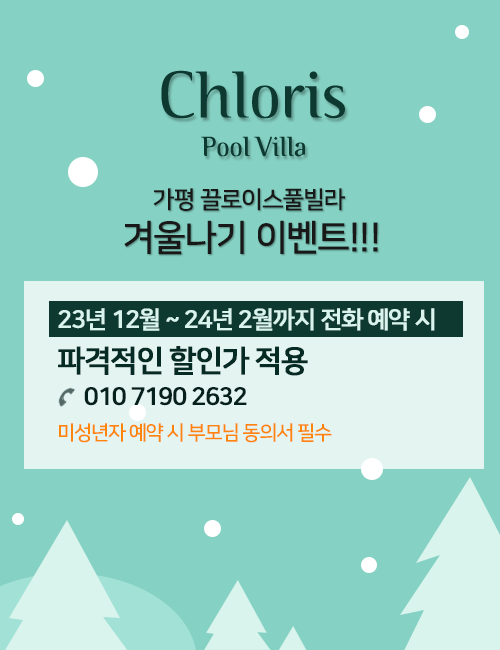
<style>
.page{position:relative;width:500px;height:650px;background:#85d1c3}
.page>*{position:absolute;margin:0}
.t1{font:36px/32.5px "NanumSquare_acB";color:#181818}
.t2{font:24px/32.5px "NanumSquare_acB";color:#181818}
.t3{font:24px/38.5px "NanumSquareB";letter-spacing:-0.06em;color:#d9f4ed;font-weight:bold}
.t4{font:30px/38.5px "NanumSquareB";letter-spacing:-0.06em;color:#052b24;font-weight:bold}
.t5{font:24px/38.5px "NanumSquareB";letter-spacing:-0.06em;color:#06201b;font-weight:bold}
.t6{font:20px/38.5px "NanumSquareB";letter-spacing:-0.06em;color:#ff840b}
</style>
<div class="page">
<p class="t1" style="left:124px;top:188px;width:254px;height:67px;text-align:center"><span class="t2">가평 끌로이스풀빌라 <br></span>겨울나기 이벤트!!!</p>
<p class="t3" style="left:58px;top:308px;width:377px;height:135px">23년 12월 ~ 24년 2월까지 전화 예약 시<br><span class="t4">파격적인 할인가 적용<br>       </span><span class="t5">010 7190 2632<br></span><span class="t6">미성년자 예약 시 부모님 동의서 필수</span></p>
</div>
